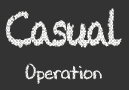
<style>
.page{position:relative;width:129px;height:90px;background:#333333}
.page>*{position:absolute;margin:0}
.t1{font:20px/56px "DJBChalkItUp";color:#e8e8e6}
.t2{font:46px/56px "Chalkduster";letter-spacing:-0.08em;color:#e8e8e6;scale:0.75 1}
</style>
<div class="page">
<p class="t1" style="left:5px;top:8px;width:117px;height:76px;text-align:center"><span class="t2">Casual<br></span>Operation</p>
</div>
